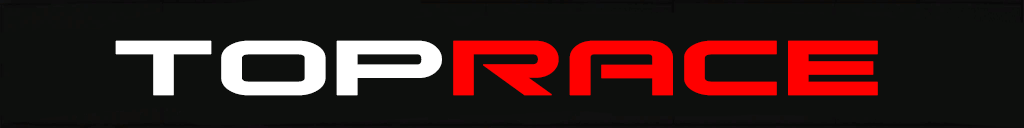
<style>
.page{position:relative;width:1024px;height:128px;background:#0d0f0d}
.page>*{position:absolute;margin:0}
.t1{font:104.5px "Bitsumishi";color:#ff0000;font-weight:bold;scale:1.55 1}
.t2{font:104.5px "Bitsumishi";color:#ffffff;font-weight:bold;scale:1.55 1}
</style>
<div class="page">
<p class="t1" style="left:115px;top:40px;width:763px;height:56px"><span class="t2">TOP</span>RACE</p>
</div>
